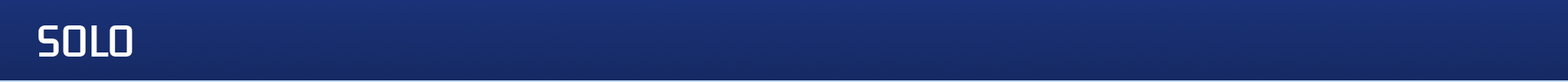
<style>
.page{position:relative;width:1568px;height:82px}
.page>*{position:absolute;margin:0}
.t1{font:39.2px "KdamThmorPro-Regular";color:#ffffff}
</style>
<div class="page">
<p class="t1" style="left:38px;top:25px;width:94px;height:31px">SOLO</p>
</div>
